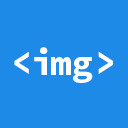
<style>
.page{position:relative;width:128px;height:128px;background:#1d8ae7}
.page>*{position:absolute;margin:0}
.t1{font:37px "SourceCodePro-Bold";letter-spacing:-0.025em;color:#ffffff}
</style>
<div class="page">
<p class="t1" style="left:14px;top:47px;width:99px;height:36px">&lt;img&gt;</p>
</div>
